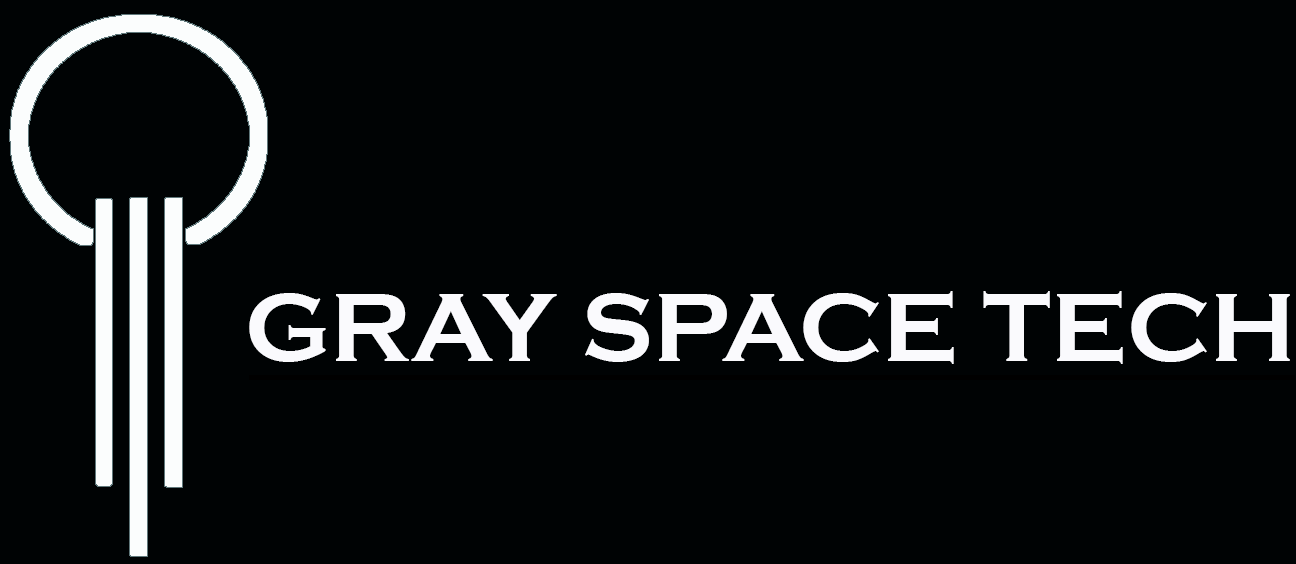
<style>
.page{position:relative;width:1296px;height:564px;background:#000304}
.page>*{position:absolute;margin:0}
.t1{font:100px "CopperplateGothic-Bold";color:#fafafd}
</style>
<div class="page">
<p class="t1" style="left:249px;top:291px;width:1041px;height:73px">GRAY SPACE TECH</p>
</div>
